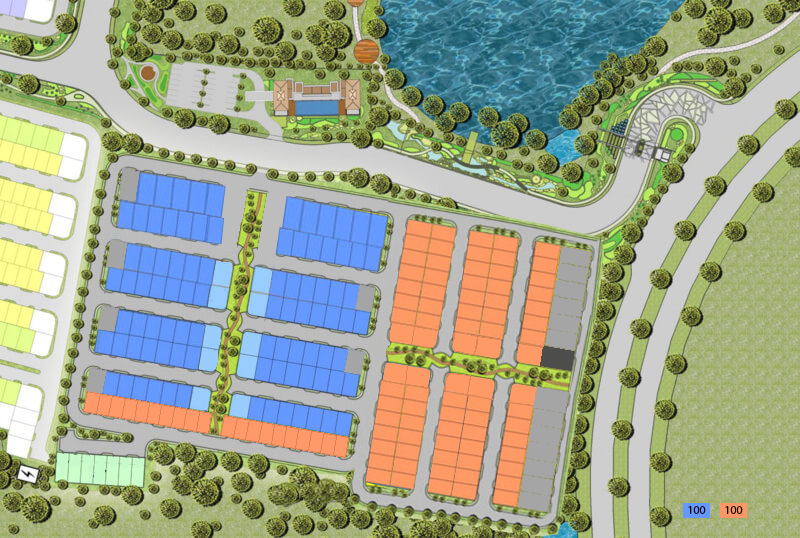
<style>
.page{position:relative;width:800px;height:538px}
.page>*{position:absolute;margin:0}
.t1{font:12px "MyriadPro-Regular";color:#000000}
</style>
<div class="page">
<p class="t1" style="left:688px;top:506px;width:18px;height:8px">100</p>
<p class="t1" style="left:725px;top:506px;width:18px;height:8px">100</p>
</div>
